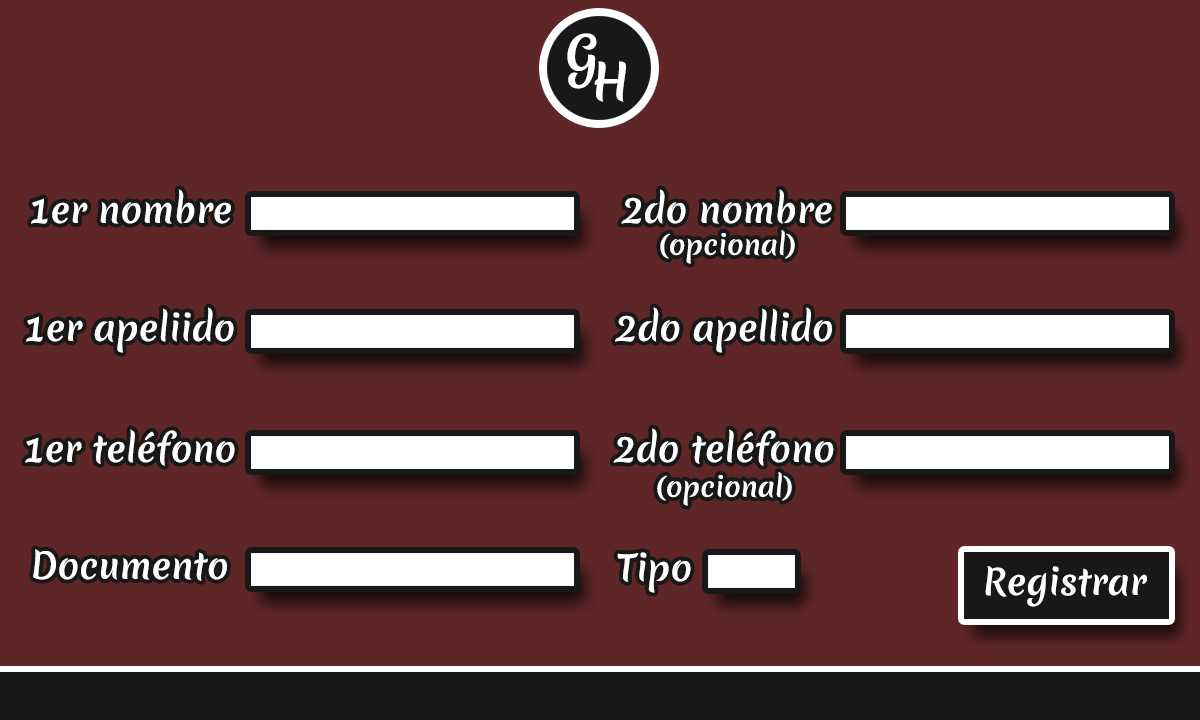
<style>
.page{position:relative;width:1200px;height:720px;background:#5e2626}
.page>*{position:absolute;margin:0}
.t1{font:48.4px "MeriendaOne-Regular";color:#ffffff}
.t2{font:35.1px "MeriendaOne-Regular";color:#ffffff}
.t3{font:26.8px "MeriendaOne-Regular";color:#ffffff}
</style>
<div class="page">
<p class="t1" style="left:567px;top:33px;width:30px;height:56px">G</p>
<p class="t1" style="left:594px;top:61px;width:32px;height:41px">H</p>
<p class="t2" style="left:31px;top:189px;width:200px;height:35px">1er nombre</p>
<p class="t2" style="left:621px;top:189px;width:211px;height:35px">2do nombre</p>
<p class="t3" style="left:660px;top:230px;width:135px;height:34px">(opcional)</p>
<p class="t2" style="left:26px;top:307px;width:208px;height:46px">1er apeliido</p>
<p class="t2" style="left:615px;top:307px;width:217px;height:46px">2do apellido</p>
<p class="t2" style="left:25px;top:429px;width:210px;height:37px">1er teléfono</p>
<p class="t2" style="left:613px;top:428px;width:221px;height:38px">2do teléfono</p>
<p class="t3" style="left:657px;top:472px;width:135px;height:34px">(opcional)</p>
<p class="t2" style="left:33px;top:549px;width:194px;height:32px">Documento</p>
<p class="t2" style="left:617px;top:552px;width:74px;height:41px">Tipo</p>
<p class="t2" style="left:985px;top:566px;width:162px;height:41px">Registrar</p>
</div>
